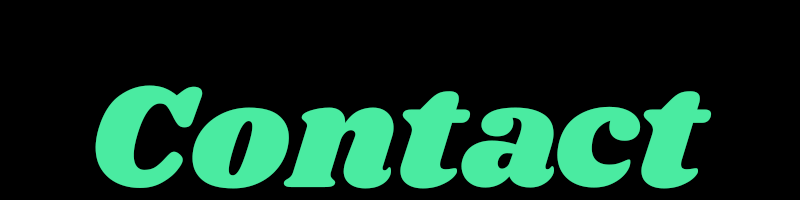
<style>
.page{position:relative;width:800px;height:200px;background:#000000}
.page>*{position:absolute;margin:0}
.t1{font:150px "Shrikhand-Regular";color:#4aeba1}
</style>
<div class="page">
<p class="t1" style="left:95px;top:85px;width:617px;height:104px">Contact</p>
</div>
